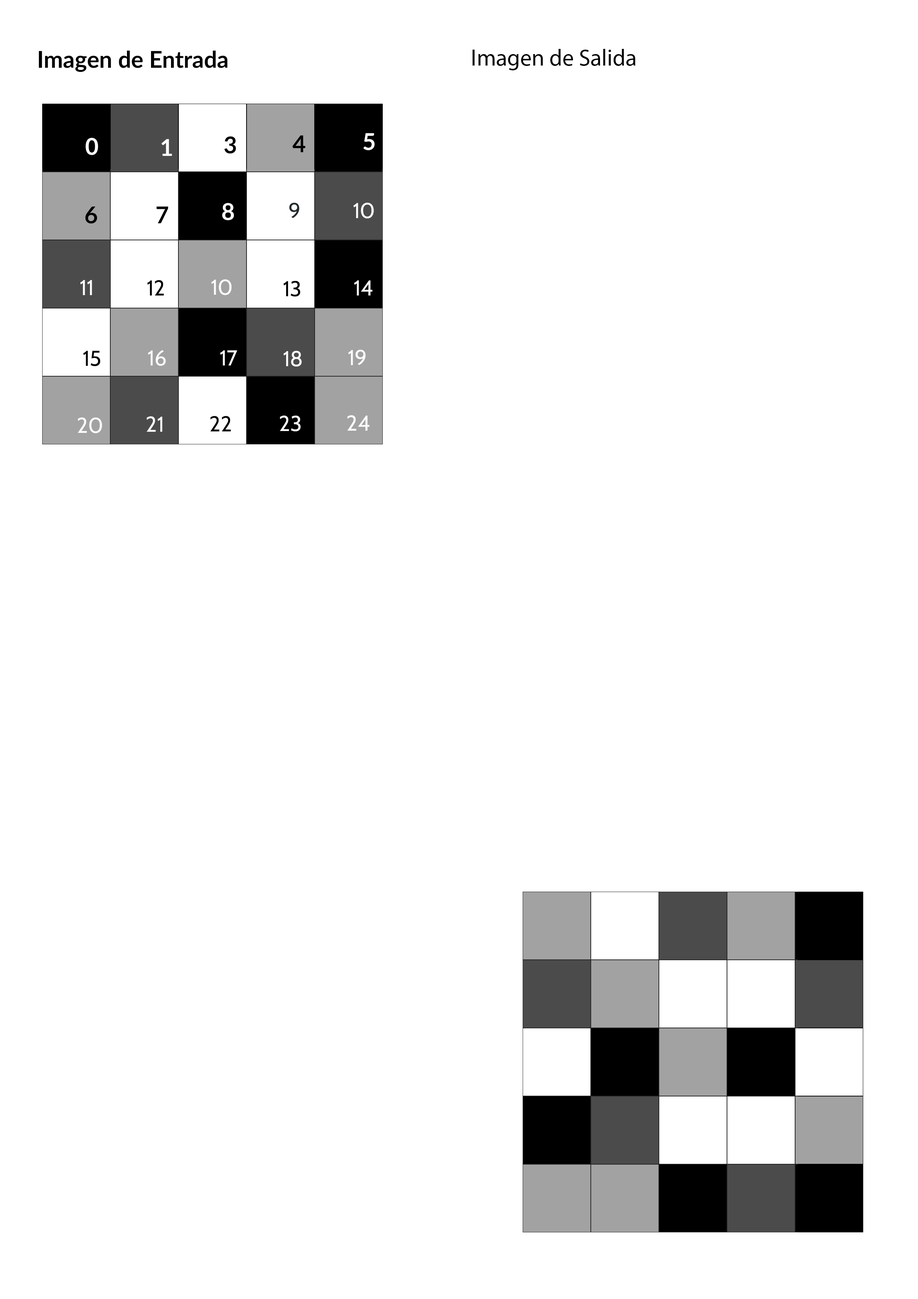
<style>
.page{position:relative;width:918px;height:1299px;background:#ffffff}
.page>*{position:absolute;margin:0}
.t1{font:23.2px "Lato-Bold";color:#000000}
.t2{font:23.2px "Lato-Bold";color:#ffffff}
.t3{font:21.6px "Cabin-Regular";color:#232b2b}
.t4{font:21.6px "Cabin-Regular";color:#fbfbfb}
.t5{font:21.6px "Cabin-Regular";color:#000000}
</style>
<div class="page">
<p class="t1" style="left:39px;top:50px;width:189px;height:22px">Imagen de Entrada</p>
<p class="t1" style="left:472px;top:49px;width:164px;height:21px">Imagen de Salida</p>
<p class="t2" style="left:86px;top:138px;width:12px;height:17px">0</p>
<p class="t1" style="left:224px;top:136px;width:12px;height:18px">3</p>
<p class="t1" style="left:292px;top:135px;width:13px;height:17px">4</p>
<p class="t2" style="left:363px;top:133px;width:12px;height:17px">5</p>
<p class="t2" style="left:161px;top:139px;width:11px;height:17px">1</p>
<p class="t1" style="left:85px;top:206px;width:12px;height:18px">6</p>
<p class="t1" style="left:157px;top:206px;width:11px;height:17px">7</p>
<p class="t2" style="left:222px;top:203px;width:12px;height:17px">8</p>
<p class="t3" style="left:289px;top:203px;width:11px;height:15px">9</p>
<p class="t4" style="left:354px;top:203px;width:20px;height:15px">10</p>
<p class="t4" style="left:80px;top:280px;width:12px;height:15px">11</p>
<p class="t5" style="left:147px;top:280px;width:17px;height:15px">12</p>
<p class="t4" style="left:211px;top:279px;width:21px;height:16px">10</p>
<p class="t5" style="left:284px;top:281px;width:16px;height:16px">13</p>
<p class="t4" style="left:354px;top:280px;width:18px;height:15px">14</p>
<p class="t5" style="left:83px;top:351px;width:17px;height:15px">15</p>
<p class="t4" style="left:148px;top:350px;width:18px;height:16px">16</p>
<p class="t4" style="left:220px;top:350px;width:17px;height:15px">17</p>
<p class="t4" style="left:284px;top:351px;width:18px;height:16px">18</p>
<p class="t4" style="left:348px;top:349px;width:18px;height:16px">19</p>
<p class="t4" style="left:78px;top:417px;width:24px;height:16px">20</p>
<p class="t4" style="left:147px;top:416px;width:16px;height:16px">21</p>
<p class="t5" style="left:210px;top:416px;width:21px;height:15px">22</p>
<p class="t4" style="left:280px;top:415px;width:21px;height:16px">23</p>
<p class="t4" style="left:347px;top:415px;width:22px;height:16px">24</p>
</div>
